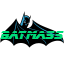
<style>
.page{position:relative;width:64px;height:64px;background:#ffffff}
.page>*{position:absolute;margin:0}
.t1{font:11.3px "BladeRunnerMovieFont";color:#00dc7a}
</style>
<div class="page">
<p class="t1" style="left:0px;top:31px;width:64px;height:8px">BatMass</p>
</div>
